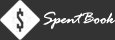
<style>
.page{position:relative;width:115px;height:40px;background:#333333}
.page>*{position:absolute;margin:0}
.t1{font:18px "RageItalic";color:#ffffff}
</style>
<div class="page">
<p class="t1" style="left:43px;top:11px;width:72px;height:18px">SpentBook</p>
</div>
